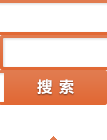
<style>
.page{position:relative;width:107px;height:140px;background:#ffffff}
.page>*{position:absolute;margin:0}
.t1{font:15px "MicrosoftYaHei-Bold";letter-spacing:0.075em;color:#ffffff}
</style>
<div class="page">
<p class="t1" style="left:37px;top:79px;width:37px;height:15px">搜 索</p>
</div>
